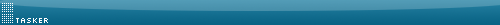
<style>
.page{position:relative;width:500px;height:25px}
.page>*{position:absolute;margin:0}
.t1{font:9px "Silkscreen";color:#ffffff}
</style>
<div class="page">
<p class="t1" style="left:16px;top:18px;width:32px;height:5px">Tasker</p>
</div>
